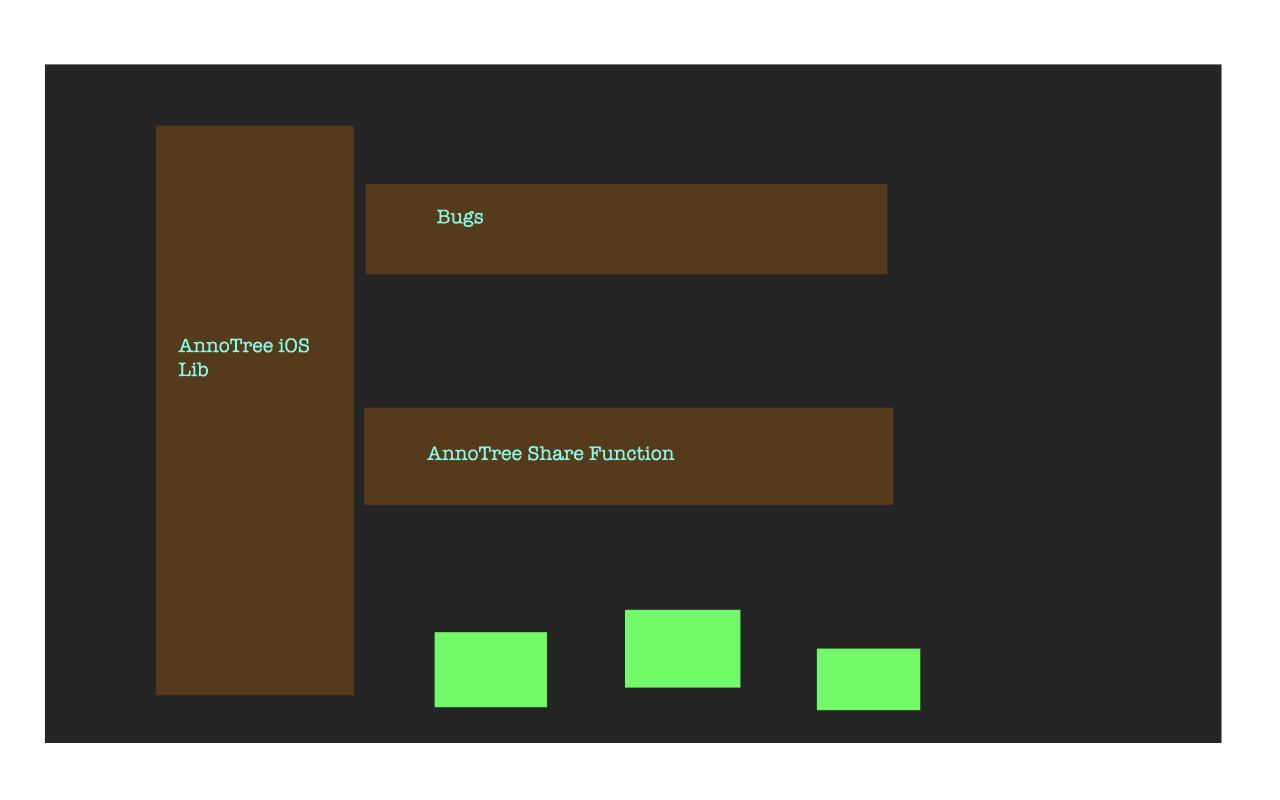
<style>
.page{position:relative;width:1280px;height:800px;background:#252525}
.page>*{position:absolute;margin:0}
.t1{font:20px "AmericanTypewriter";color:#86fbe6}
</style>
<div class="page">
<p class="t1" style="left:437px;top:209px;width:46px;height:18px">Bugs</p>
<p class="t1" style="left:178px;top:338px;width:131px;height:39px">AnnoTree iOS<br>Lib</p>
<p class="t1" style="left:427px;top:446px;width:248px;height:15px">AnnoTree Share Function</p>
</div>
